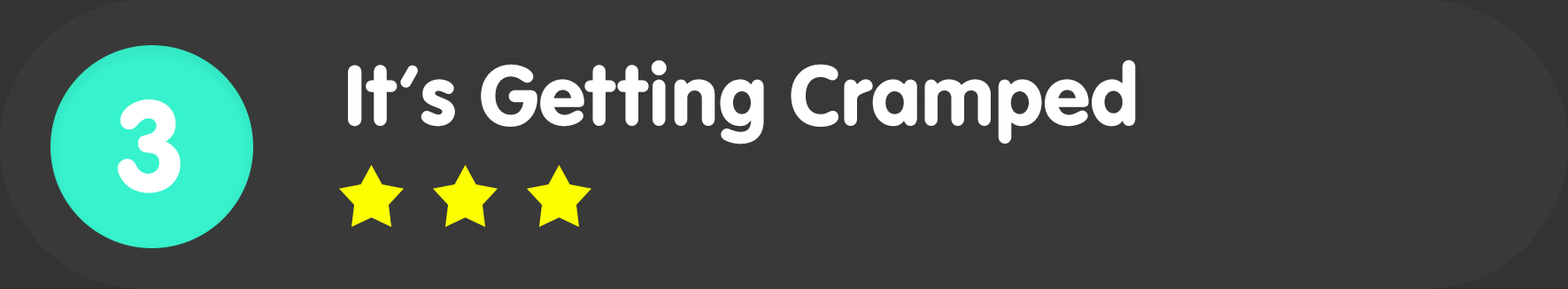
<style>
.page{position:relative;width:1568px;height:289px;background:#393939}
.page>*{position:absolute;margin:0}
.t1{font:88.5px "VAGRundschriftD";color:#ffffff}
.t2{font:132.8px "VAGRundschriftD";color:#ffffff}
</style>
<div class="page">
<p class="t1" style="left:348px;top:59px;width:788px;height:85px">It’s Getting Cramped</p>
<p class="t2" style="left:118px;top:99px;width:63px;height:94px">3</p>
</div>
